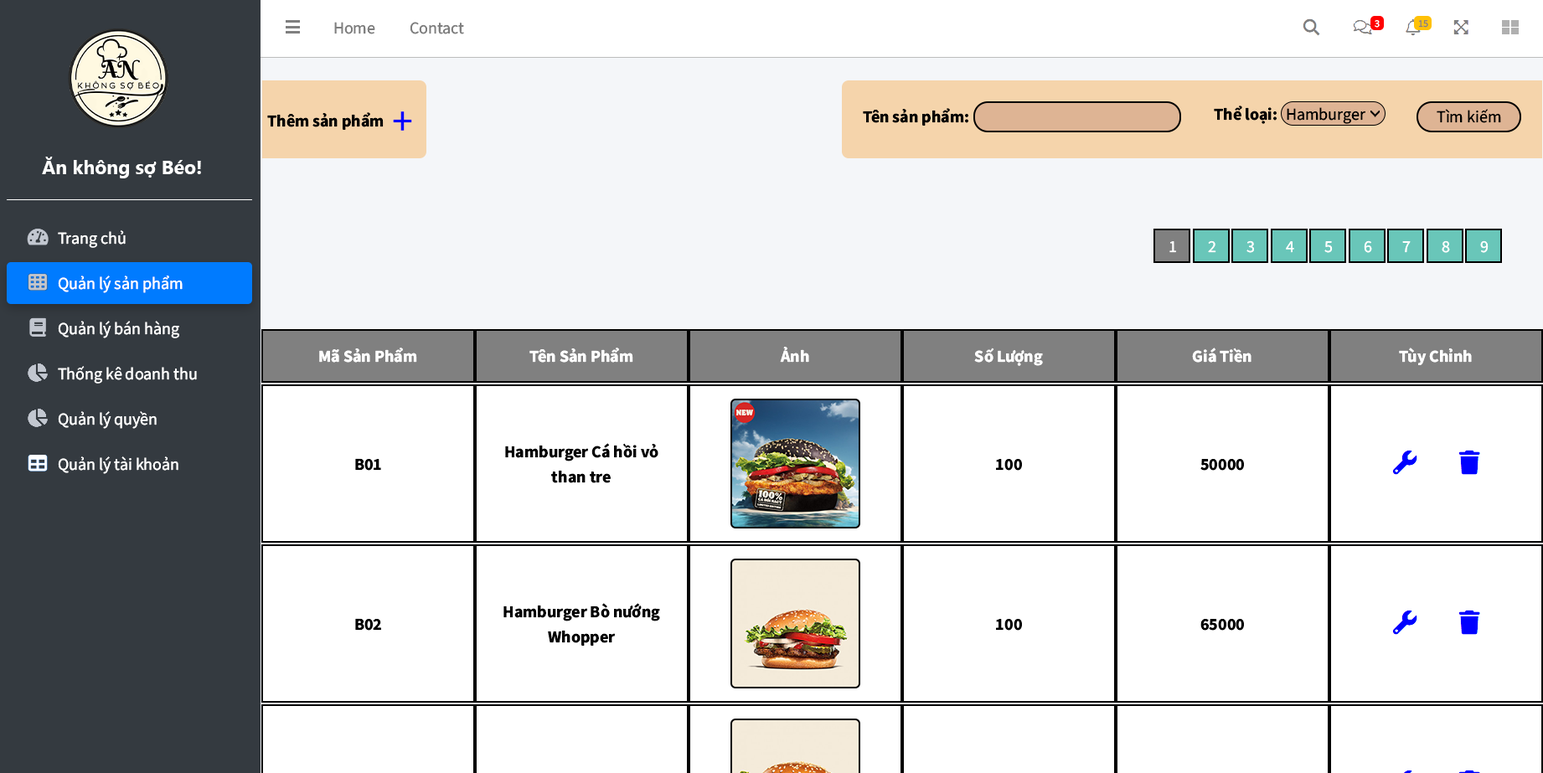
<style>
.page{position:relative;width:1543px;height:773px;background:#ffffff}
.page>*{position:absolute;margin:0}
.t1{font:16.7px "SourceSansRoman-Regular";color:#7f7f7f}
.t2{font:10px "SourceSansRoman-Regular";color:#ffffff}
.t3{font:10px "SourceSansRoman-Regular";color:#857f7f}
.t4{font:16.7px "SourceSansRoman-Bold";color:#000000}
.t5{font:41.9px "SourceSansRoman-Regular";color:#0600ff}
.t6{font:16.7px "SourceSansRoman-Regular";color:#000000}
.t7{font:19.3px "SegoeUI-Bold";color:#ffffff}
.t8{font:16.7px "SourceSansRoman-Regular";color:#ffffff}
.t9{font:16.7px "SourceSansRoman-Bold";color:#ffffff}
.t10{font:16.7px/25.1px "SourceSansRoman-Bold";color:#000000}
</style>
<div class="page">
<p class="t1" style="left:334px;top:22px;width:41px;height:12px">Home</p>
<p class="t1" style="left:410px;top:22px;width:54px;height:12px">Contact</p>
<p class="t2" style="left:1374px;top:20px;width:5px;height:8px">3</p>
<p class="t3" style="left:1418px;top:20px;width:10px;height:8px">15</p>
<p class="t4" style="left:267px;top:112px;width:117px;height:18px">Thêm sản phẩm</p>
<p class="t5" style="left:393px;top:111px;width:19px;height:20px">+</p>
<p class="t4" style="left:863px;top:108px;width:105px;height:18px">Tên sản phẩm:</p>
<p class="t4" style="left:1213px;top:106px;width:63px;height:18px">Thể loại:</p>
<p class="t6" style="left:1286px;top:107px;width:79px;height:17px">Hamburger</p>
<p class="t6" style="left:1436px;top:109px;width:65px;height:14px">Tìm kiếm</p>
<p class="t7" style="left:42px;top:157px;width:159px;height:21px">Ăn không sợ Béo!</p>
<p class="t8" style="left:58px;top:230px;width:68px;height:18px">Trang chủ</p>
<p class="t8" style="left:1169px;top:241px;width:7px;height:12px">1</p>
<p class="t8" style="left:1208px;top:240px;width:8px;height:13px">2</p>
<p class="t8" style="left:1246px;top:240px;width:8px;height:13px">3</p>
<p class="t8" style="left:1286px;top:241px;width:8px;height:12px">4</p>
<p class="t8" style="left:1324px;top:241px;width:8px;height:12px">5</p>
<p class="t8" style="left:1363px;top:240px;width:9px;height:13px">6</p>
<p class="t8" style="left:1402px;top:241px;width:8px;height:12px">7</p>
<p class="t8" style="left:1441px;top:240px;width:9px;height:13px">8</p>
<p class="t8" style="left:1480px;top:240px;width:8px;height:13px">9</p>
<p class="t8" style="left:58px;top:276px;width:125px;height:17px">Quản lý sản phẩm</p>
<p class="t8" style="left:58px;top:321px;width:121px;height:17px">Quản lý bán hàng</p>
<p class="t9" style="left:319px;top:348px;width:98px;height:15px">Mã Sản Phẩm</p>
<p class="t9" style="left:529px;top:348px;width:104px;height:15px">Tên Sản Phẩm</p>
<p class="t9" style="left:780px;top:347px;width:29px;height:16px">Ảnh</p>
<p class="t9" style="left:974px;top:348px;width:69px;height:18px">Số Lượng</p>
<p class="t9" style="left:1192px;top:348px;width:59px;height:15px">Giá Tiền</p>
<p class="t9" style="left:1399px;top:348px;width:72px;height:17px">Tùy Chỉnh</p>
<p class="t8" style="left:58px;top:366px;width:139px;height:18px">Thống kê doanh thu</p>
<p class="t8" style="left:58px;top:411px;width:99px;height:18px">Quản lý quyền</p>
<p class="t10" style="left:505px;top:443px;width:153px;height:40px;text-align:center">Hamburger Cá hồi vỏ than tre</p>
<p class="t8" style="left:58px;top:456px;width:120px;height:18px">Quản lý tài khoản</p>
<p class="t4" style="left:355px;top:458px;width:26px;height:13px">B01</p>
<p class="t4" style="left:996px;top:459px;width:26px;height:12px">100</p>
<p class="t4" style="left:1200px;top:459px;width:44px;height:12px">50000</p>
<p class="t10" style="left:503px;top:603px;width:157px;height:43px;text-align:center">Hamburger Bò nướng Whopper</p>
<p class="t4" style="left:355px;top:618px;width:26px;height:13px">B02</p>
<p class="t4" style="left:996px;top:619px;width:26px;height:12px">100</p>
<p class="t4" style="left:1200px;top:619px;width:44px;height:12px">65000</p>
</div>
